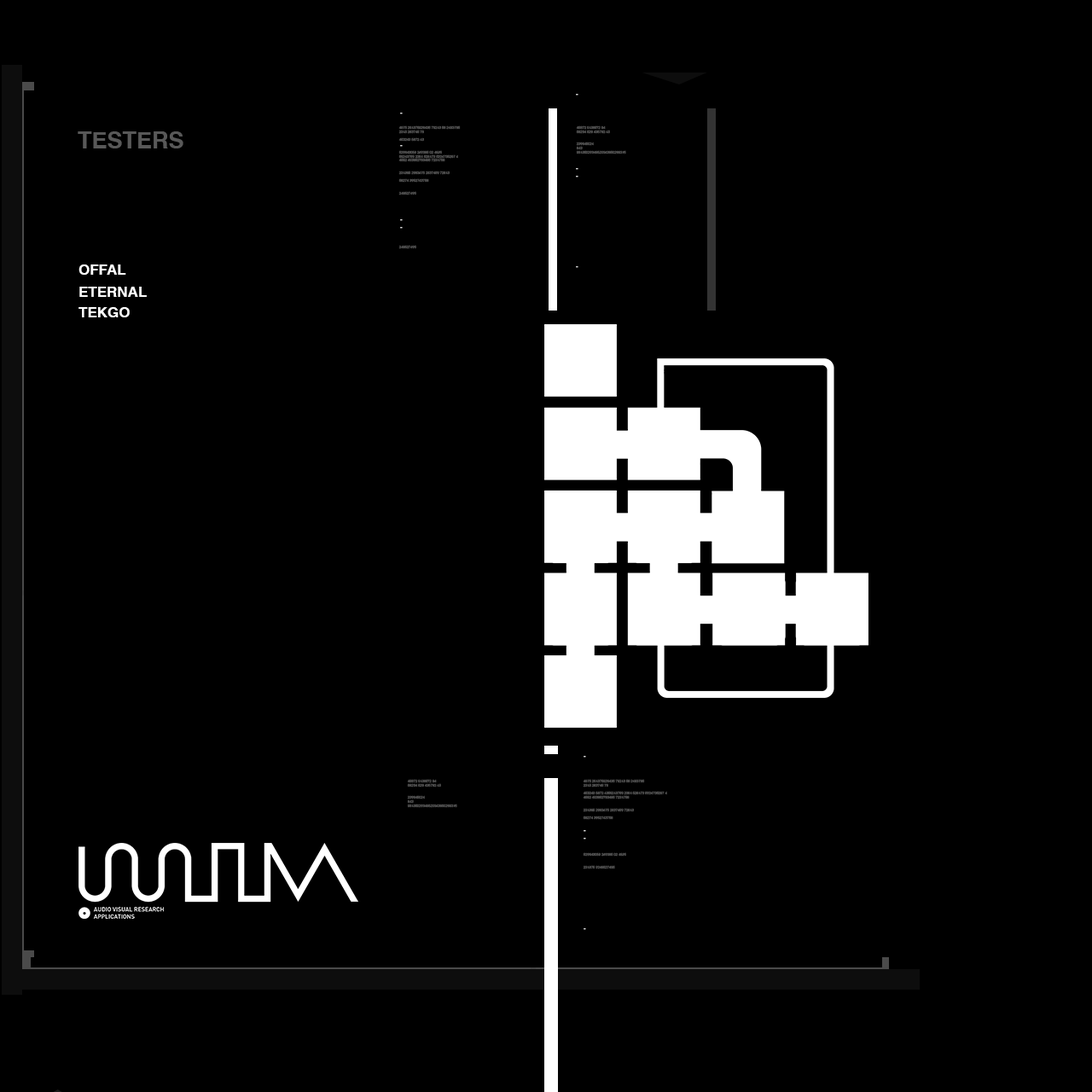
<style>
.page{position:relative;width:1092px;height:1092px;background:#000000}
.page>*{position:absolute;margin:0}
.t1{font:23px "Helvetica-Bold";color:#585858;text-transform:uppercase}
.t2{font:14.5px "Helvetica-Bold";color:#ffffff;text-transform:uppercase}
</style>
<div class="page">
<p class="t1" style="left:78px;top:131px;width:105px;height:17px">TESTERS</p>
<p class="t2" style="left:78px;top:264px;width:48px;height:11px">OFFAL</p>
<p class="t2" style="left:79px;top:287px;width:68px;height:10px">ETERNAL</p>
<p class="t2" style="left:78px;top:307px;width:52px;height:10px">TEKGO</p>
</div>
